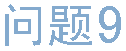
<style>
.page{position:relative;width:126px;height:51px;background:#ffffff}
.page>*{position:absolute;margin:0}
.t1{font:48px "SimHei";color:#84aace}
.t2{font:56px "SimHei";color:#84aace}
</style>
<div class="page">
<p class="t1" style="left:5px;top:4px;width:87px;height:42px">问题</p>
<p class="t2" style="left:99px;top:6px;width:22px;height:37px">9</p>
</div>
